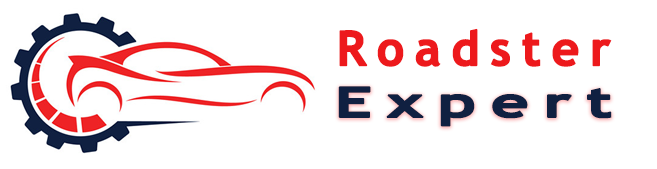
<style>
.page{position:relative;width:657px;height:169px;background:#ffffff}
.page>*{position:absolute;margin:0}
.t1{font:48px "TrebuchetMS-Bold";letter-spacing:0.2em;color:#ed191c;font-weight:bold}
.t2{font:42px "TrebuchetMS-Bold";letter-spacing:0.2em;color:#102041;font-weight:bold;scale:1.56 1}
</style>
<div class="page">
<p class="t1" style="left:339px;top:28px;width:273px;height:39px">Roadster</p>
<p class="t2" style="left:338px;top:86px;width:274px;height:41px">Expert</p>
</div>
